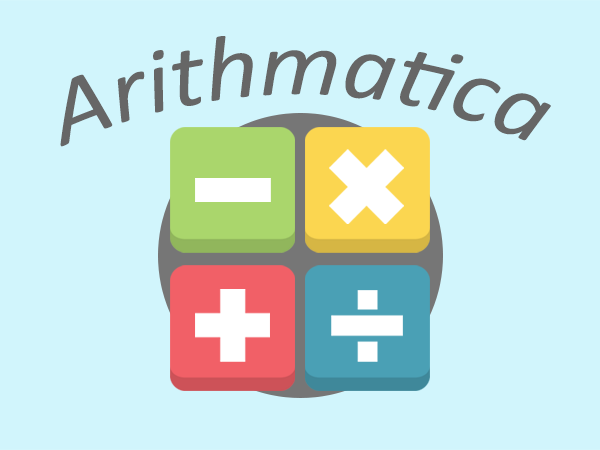
<style>
.page{position:relative;width:600px;height:450px;background:#d1f5fc}
.page>*{position:absolute;margin:0}
.t1{font:93.3px "Calibri-Italic";color:#666666}
</style>
<div class="page">
<p class="t1" style="left:60px;top:36px;width:491px;height:111px">Arithmatica</p>
</div>
